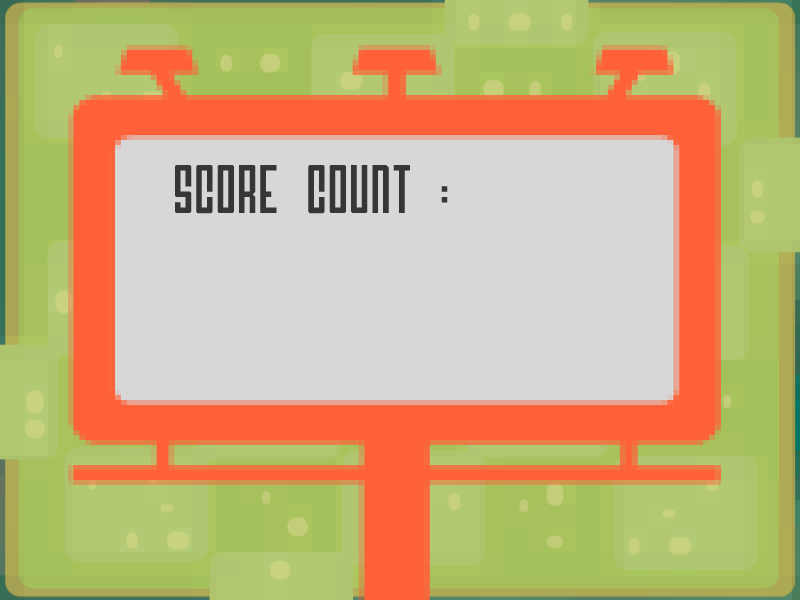
<style>
.page{position:relative;width:800px;height:600px;background:#d7d7d7}
.page>*{position:absolute;margin:0}
.t1{font:48px "Airship27";color:#363636}
</style>
<div class="page">
<p class="t1" style="left:175px;top:165px;width:273px;height:49px">Score Count :</p>
</div>
